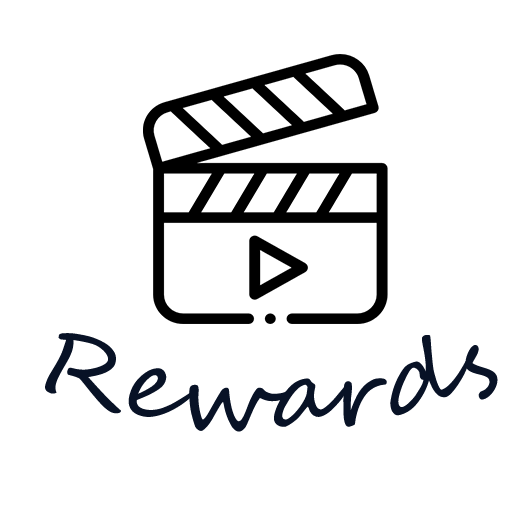
<style>
.page{position:relative;width:512px;height:512px;background:#ffffff}
.page>*{position:absolute;margin:0}
.t1{font:91.6px "SegoeScript";color:#081226}
</style>
<div class="page">
<p class="t1" style="left:45px;top:333px;width:453px;height:99px">Rewards</p>
</div>
